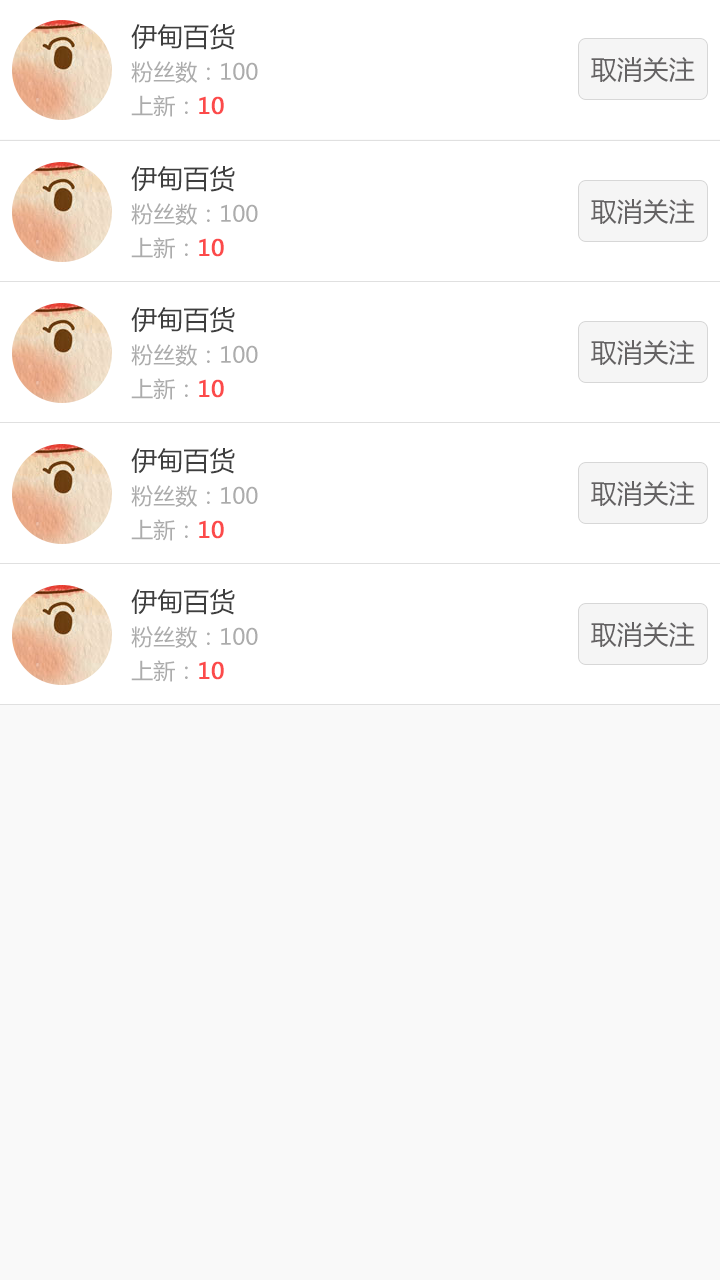
<style>
.page{position:relative;width:720px;height:1280px;background:#f9f9f9}
.page>*{position:absolute;margin:0}
.t1{font:26px "MicrosoftYaHei";color:#3e3e3e}
.t2{font:22px "MicrosoftYaHei";color:#acacac}
.t3{font:26px "MicrosoftYaHei";color:#646263}
.t4{font:22px "MicrosoftYaHei";color:#fc4a4a;font-weight:bold}
</style>
<div class="page">
<p class="t1" style="left:131px;top:23px;width:104px;height:27px">伊甸百货</p>
<p class="t2" style="left:131px;top:61px;width:127px;height:22px">粉丝数：100</p>
<p class="t3" style="left:591px;top:57px;width:104px;height:25px">取消关注</p>
<p class="t2" style="left:131px;top:95px;width:93px;height:22px">上新：<span class="t4">10</span></p>
<p class="t1" style="left:131px;top:165px;width:104px;height:27px">伊甸百货</p>
<p class="t2" style="left:131px;top:203px;width:127px;height:22px">粉丝数：100</p>
<p class="t3" style="left:591px;top:199px;width:104px;height:25px">取消关注</p>
<p class="t2" style="left:131px;top:237px;width:93px;height:22px">上新：<span class="t4">10</span></p>
<p class="t1" style="left:131px;top:306px;width:104px;height:27px">伊甸百货</p>
<p class="t3" style="left:591px;top:340px;width:104px;height:25px">取消关注</p>
<p class="t2" style="left:131px;top:344px;width:127px;height:22px">粉丝数：100</p>
<p class="t2" style="left:131px;top:378px;width:93px;height:22px">上新：<span class="t4">10</span></p>
<p class="t1" style="left:131px;top:447px;width:104px;height:27px">伊甸百货</p>
<p class="t2" style="left:131px;top:485px;width:127px;height:22px">粉丝数：100</p>
<p class="t3" style="left:591px;top:481px;width:104px;height:25px">取消关注</p>
<p class="t2" style="left:131px;top:519px;width:93px;height:22px">上新：<span class="t4">10</span></p>
<p class="t1" style="left:131px;top:588px;width:104px;height:27px">伊甸百货</p>
<p class="t2" style="left:131px;top:626px;width:127px;height:22px">粉丝数：100</p>
<p class="t3" style="left:591px;top:622px;width:104px;height:25px">取消关注</p>
<p class="t2" style="left:131px;top:660px;width:93px;height:22px">上新：<span class="t4">10</span></p>
</div>
